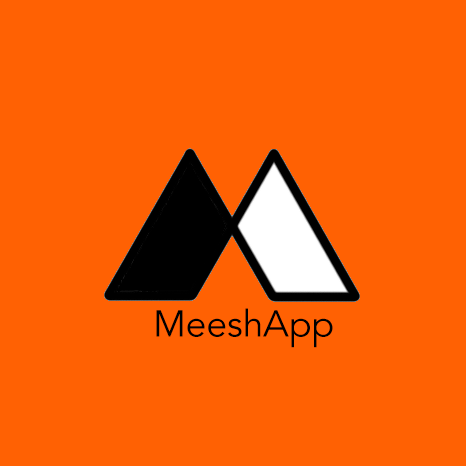
<style>
.page{position:relative;width:466px;height:466px;background:#ff6103}
.page>*{position:absolute;margin:0}
.t1{font:37px "Avenir-Book";color:#000000}
</style>
<div class="page">
<p class="t1" style="left:156px;top:308px;width:177px;height:40px">MeeshApp</p>
</div>
